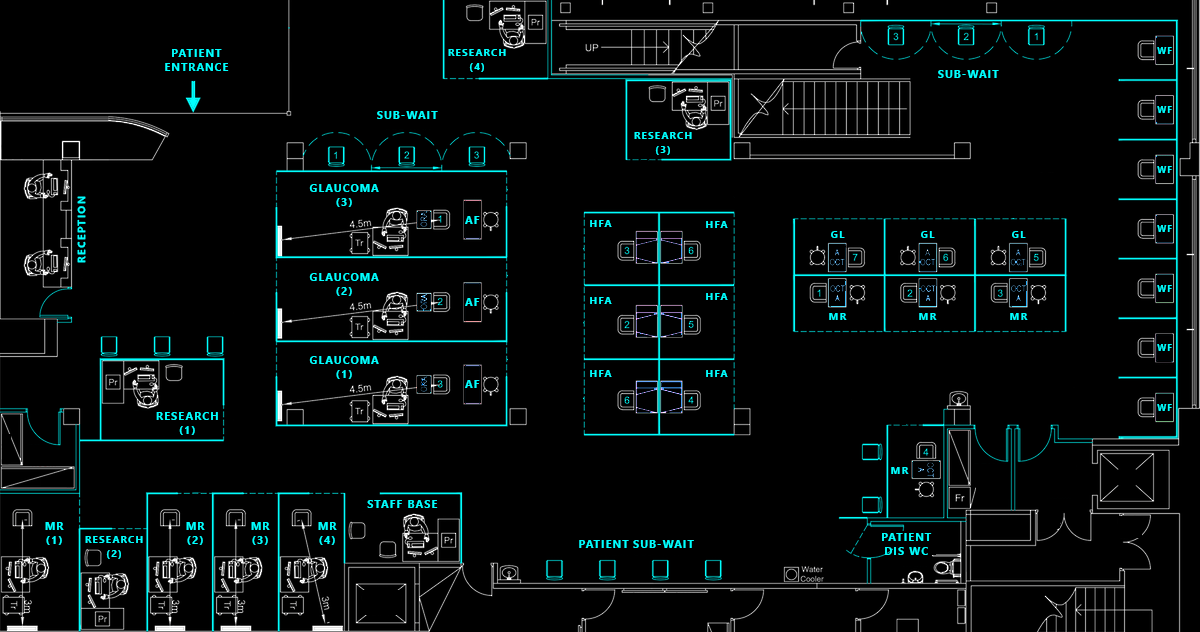
<style>
.page{position:relative;width:1200px;height:632px;background:#000000}
.page>*{position:absolute;margin:0}
.t1{font:10.6px/7.1px "SegoeUI-Bold";letter-spacing:0.12em;color:#00ffff}
.t2{font:9.9px/6.7px "SegoeUI-Bold";letter-spacing:0.12em;color:#00ffff}
.t3{font:8.7px "SegoeUI-Bold";letter-spacing:0.12em;color:#00ffff}
.t4{font:10.6px "SegoeUI-Bold";letter-spacing:0.12em;color:#00ffff}
.t5{font:10.2px "SegoeUI-Bold";letter-spacing:0.12em;color:#00ffff}
</style>
<div class="page">
<p class="t1" style="left:165px;top:49px;width:64px;height:22px;text-align:center">PATIENT<br><br>ENTRANCE</p>
<p class="t2" style="left:448px;top:49px;width:58px;height:23px;text-align:center">RESEARCH<br><br>(4)</p>
<p class="t3" style="left:1157px;top:47px;width:15px;height:7px">WF</p>
<p class="t4" style="left:938px;top:70px;width:61px;height:8px">SUB-WAIT</p>
<p class="t4" style="left:377px;top:111px;width:61px;height:8px">SUB-WAIT</p>
<p class="t3" style="left:1157px;top:106px;width:15px;height:7px">WF</p>
<p class="t2" style="left:634px;top:132px;width:58px;height:23px;text-align:center">RESEARCH<br><br>(3)</p>
<p class="t3" style="left:1157px;top:166px;width:15px;height:7px">WF</p>
<p class="t1" style="left:309px;top:184px;width:70px;height:23px;text-align:center">GLAUCOMA<br><br>(3)<br><br>(5)</p>
<p class="t4" style="left:77px;top:196px;width:9px;height:67px;rotate:-90deg">RECEPTION</p>
<p class="t4" style="left:465px;top:216px;width:15px;height:8px">AF</p>
<p class="t5" style="left:590px;top:220px;width:22px;height:7px">HFA</p>
<p class="t5" style="left:706px;top:221px;width:22px;height:7px">HFA</p>
<p class="t5" style="left:831px;top:231px;width:14px;height:7px">GL</p>
<p class="t5" style="left:921px;top:231px;width:14px;height:7px">GL</p>
<p class="t5" style="left:1012px;top:231px;width:14px;height:7px">GL</p>
<p class="t3" style="left:1157px;top:225px;width:15px;height:7px">WF</p>
<p class="t1" style="left:309px;top:273px;width:70px;height:23px;text-align:center">GLAUCOMA<br><br>(2)<br><br>(5)</p>
<p class="t5" style="left:706px;top:293px;width:22px;height:7px">HFA</p>
<p class="t3" style="left:1157px;top:285px;width:15px;height:7px">WF</p>
<p class="t4" style="left:465px;top:298px;width:15px;height:8px">AF</p>
<p class="t5" style="left:590px;top:297px;width:22px;height:7px">HFA</p>
<p class="t5" style="left:829px;top:313px;width:18px;height:7px">MR</p>
<p class="t5" style="left:919px;top:313px;width:18px;height:7px">MR</p>
<p class="t5" style="left:1010px;top:313px;width:18px;height:7px">MR</p>
<p class="t3" style="left:1157px;top:344px;width:15px;height:7px">WF</p>
<p class="t1" style="left:309px;top:356px;width:70px;height:23px;text-align:center">GLAUCOMA<br><br>(1)<br><br>(5)</p>
<p class="t5" style="left:590px;top:370px;width:22px;height:7px">HFA</p>
<p class="t5" style="left:706px;top:370px;width:22px;height:7px">HFA</p>
<p class="t4" style="left:465px;top:380px;width:15px;height:8px">AF</p>
<p class="t1" style="left:156px;top:412px;width:62px;height:23px;text-align:center">RESEARCH<br><br>(1)</p>
<p class="t3" style="left:1157px;top:404px;width:15px;height:7px">WF</p>
<p class="t5" style="left:891px;top:467px;width:18px;height:7px">MR</p>
<p class="t4" style="left:367px;top:500px;width:71px;height:8px">STAFF BASE</p>
<p class="t1" style="left:45px;top:522px;width:19px;height:23px;text-align:center">MR<br><br>(1)</p>
<p class="t1" style="left:186px;top:522px;width:19px;height:23px;text-align:center">MR<br><br>(2)</p>
<p class="t1" style="left:251px;top:522px;width:19px;height:23px;text-align:center">MR<br><br>(3)</p>
<p class="t1" style="left:318px;top:522px;width:19px;height:23px;text-align:center">MR<br><br>(4)</p>
<p class="t1" style="left:882px;top:533px;width:50px;height:22px;text-align:center">PATIENT<br><br>DIS WC</p>
<p class="t2" style="left:85px;top:536px;width:58px;height:23px;text-align:center">RESEARCH<br><br>(2)</p>
<p class="t4" style="left:579px;top:540px;width:115px;height:8px">PATIENT SUB-WAIT</p>
</div>
